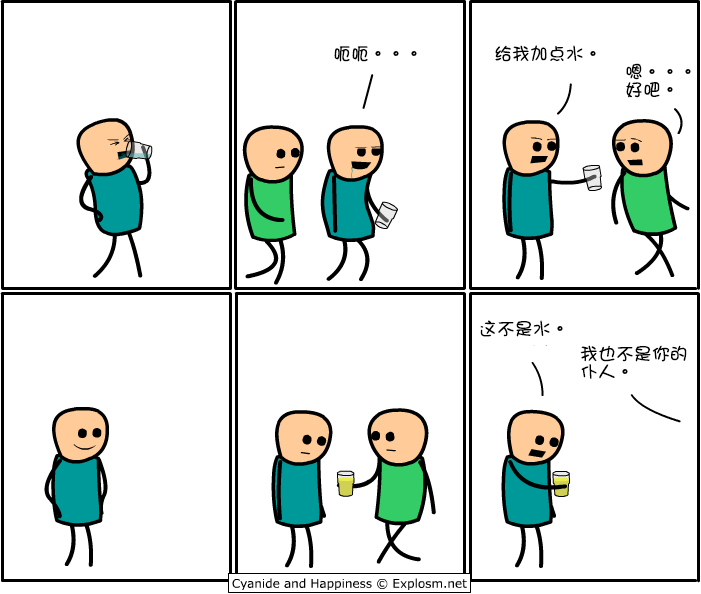
<style>
.page{position:relative;width:701px;height:594px;background:#ffffff}
.page>*{position:absolute;margin:0}
.t1{font:18px "DFGirl";color:#000000}
.t2{font:18px/18px "DFGirl";color:#000000}
</style>
<div class="page">
<p class="t1" style="left:334px;top:46px;width:83px;height:16px">呃呃。。。</p>
<p class="t1" style="left:495px;top:45px;width:101px;height:17px">给我加点水。</p>
<p class="t2" style="left:626px;top:63px;width:65px;height:35px">嗯。。。<br>好吧。</p>
<p class="t1" style="left:480px;top:320px;width:83px;height:17px">这不是水。</p>
<p class="t2" style="left:580px;top:345px;width:107px;height:34px">我也不是你的<br>仆人。</p>
</div>
